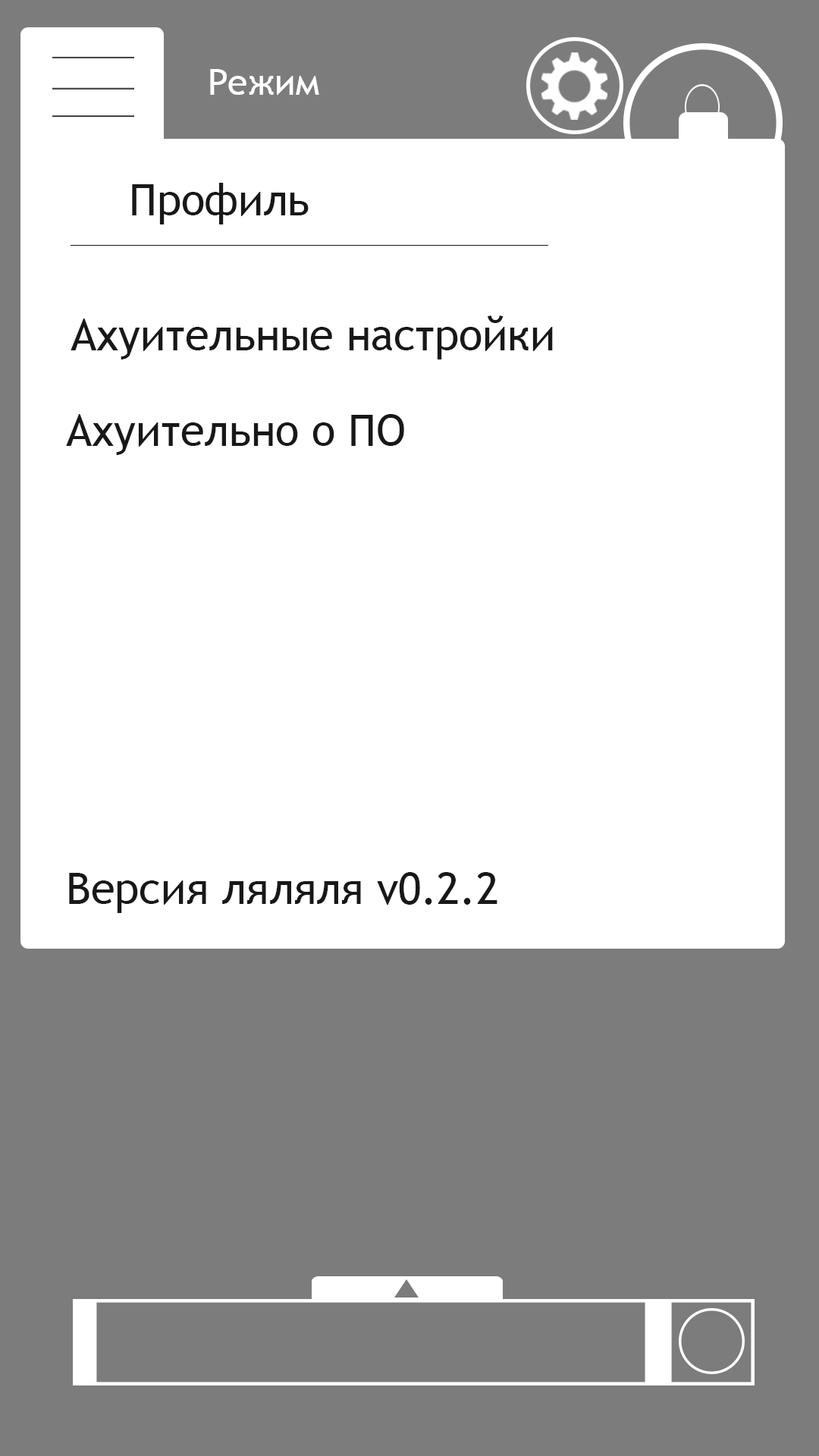
<style>
.page{position:relative;width:819px;height:1456px;background:#ffffff}
.page>*{position:absolute;margin:0}
.t1{font:36.4px "TrebuchetMS";color:#ffffff}
.t2{font:43.6px "TrebuchetMS";color:#181819}
</style>
<div class="page">
<p class="t1" style="left:210px;top:69px;width:109px;height:26px">Режим</p>
<p class="t2" style="left:132px;top:183px;width:177px;height:41px">Профиль</p>
<p class="t2" style="left:71px;top:315px;width:482px;height:44px">Ахуительные настройки</p>
<p class="t2" style="left:66px;top:414px;width:338px;height:41px">Ахуительно о ПО</p>
<p class="t2" style="left:69px;top:872px;width:428px;height:41px">Версия ляляля v0.2.2</p>
</div>
